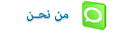
<style>
.page{position:relative;width:115px;height:32px;background:#ffffff}
.page>*{position:absolute;margin:0}
.t1{font:18px "AdobeArabic-Regular";color:#0077aa}
</style>
<div class="page">
<p class="t1" style="left:27px;top:10px;width:42px;height:11px">من نحـن</p>
</div>
